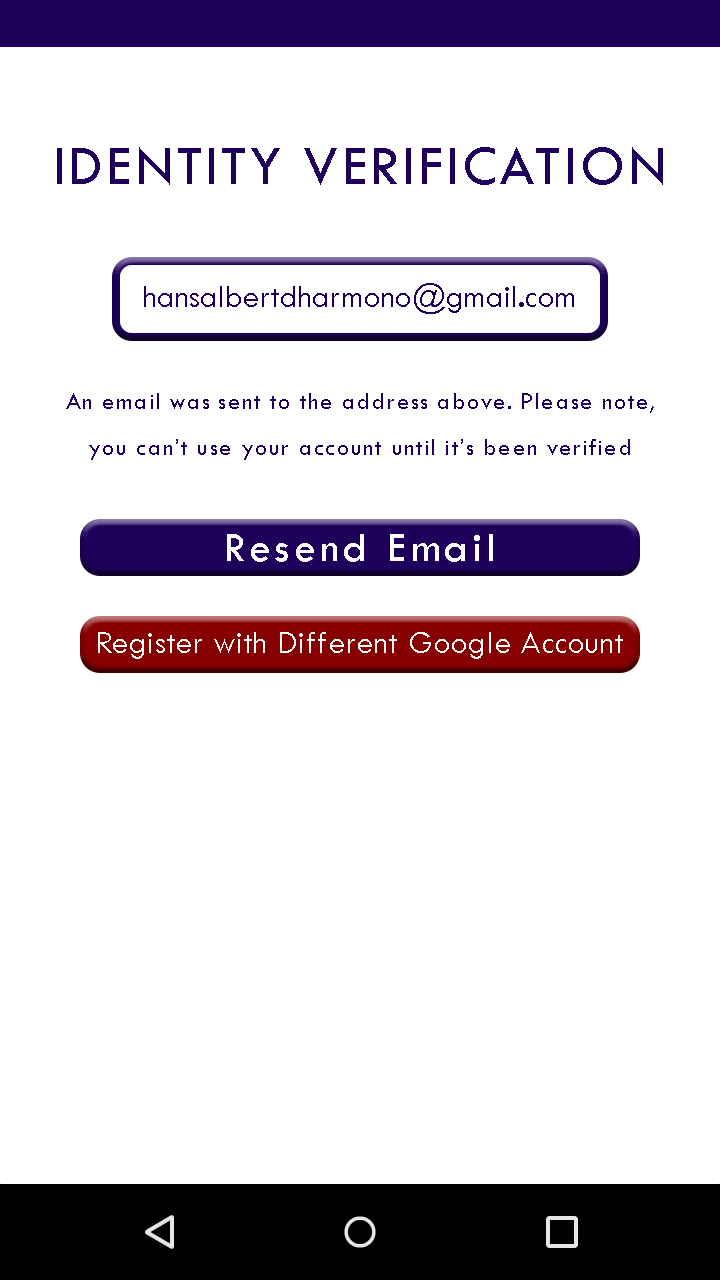
<style>
.page{position:relative;width:720px;height:1280px;background:#ffffff}
.page>*{position:absolute;margin:0}
.t1{font:58.3px "TwCenMT-Regular";letter-spacing:0.05em;color:#1e005a;text-transform:uppercase}
.t2{font:33.3px "TwCenMT-Regular";color:#1e005a}
.t3{font:25px/45.8px "TwCenMT-Regular";letter-spacing:0.05em;color:#1e005a}
.t4{font:43.2px "TwCenMT-Regular";letter-spacing:0.1em;color:#ffffff}
.t5{font:33.3px "TwCenMT-Regular";letter-spacing:0.01em;color:#ffffff}
</style>
<div class="page">
<p class="t1" style="left:57px;top:147px;width:606px;height:38px">identity verification</p>
<p class="t2" style="left:144px;top:283px;width:430px;height:31px">hansalbertdharmono@gmail.com</p>
<p class="t3" style="left:66px;top:393px;width:588px;height:67px;text-align:justify">An email was sent to the address above. Please note, you can’t use your account until it’s been verified</p>
<p class="t4" style="left:227px;top:534px;width:266px;height:28px">Resend Email</p>
<p class="t5" style="left:98px;top:632px;width:525px;height:27px">Register with Different Google Account</p>
</div>
